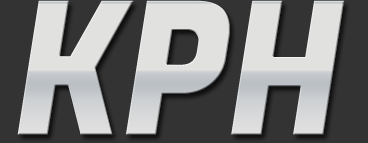
<style>
.page{position:relative;width:368px;height:143px;background:#333333}
.page>*{position:absolute;margin:0}
.t1{font:185.2px "FugazOne-Regular";color:#dfdfdf;scale:0.89 1}
</style>
<div class="page">
<p class="t1" style="left:17px;top:0px;width:327px;height:135px">KPH</p>
</div>
